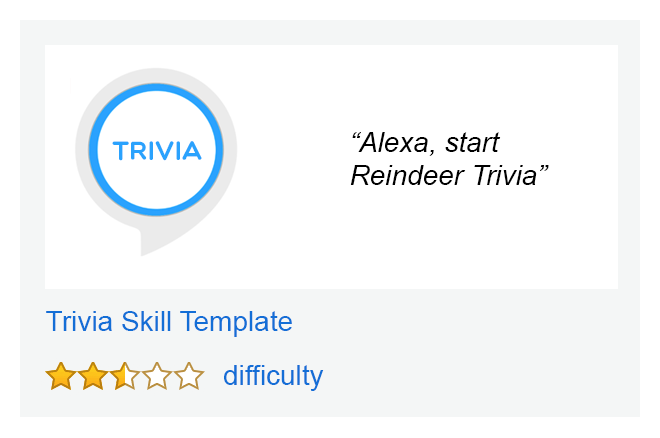
<style>
.page{position:relative;width:660px;height:438px;background:#ffffff}
.page>*{position:absolute;margin:0}
.t1{font:28px "Arial-ItalicMT";color:#000000}
.t2{font:26.9px "Multicolore";color:#2aa2fd}
.t3{font:28px "ArialMT";color:#136ed6}
</style>
<div class="page">
<p class="t1" style="left:350px;top:132px;width:199px;height:53px">“Alexa, start<br>Reindeer Trivia”</p>
<p class="t2" style="left:112px;top:141px;width:90px;height:20px">TRIVIA</p>
<p class="t3" style="left:46px;top:311px;width:246px;height:26px">Trivia Skill Template</p>
<p class="t3" style="left:224px;top:365px;width:100px;height:26px">difficulty</p>
</div>
